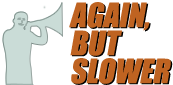
<style>
.page{position:relative;width:173px;height:85px;background:#ffffff}
.page>*{position:absolute;margin:0}
.t1{font:31px/28px "Impact";color:#bf6321;font-style:italic}
</style>
<div class="page">
<p class="t1" style="left:69px;top:2px;width:102px;height:82px">AGAIN,<br>BUT<br>SLOWER</p>
<p class="t1" style="left:70px;top:3px;width:103px;height:82px">AGAIN,<br>BUT<br>SLOWER</p>
</div>
